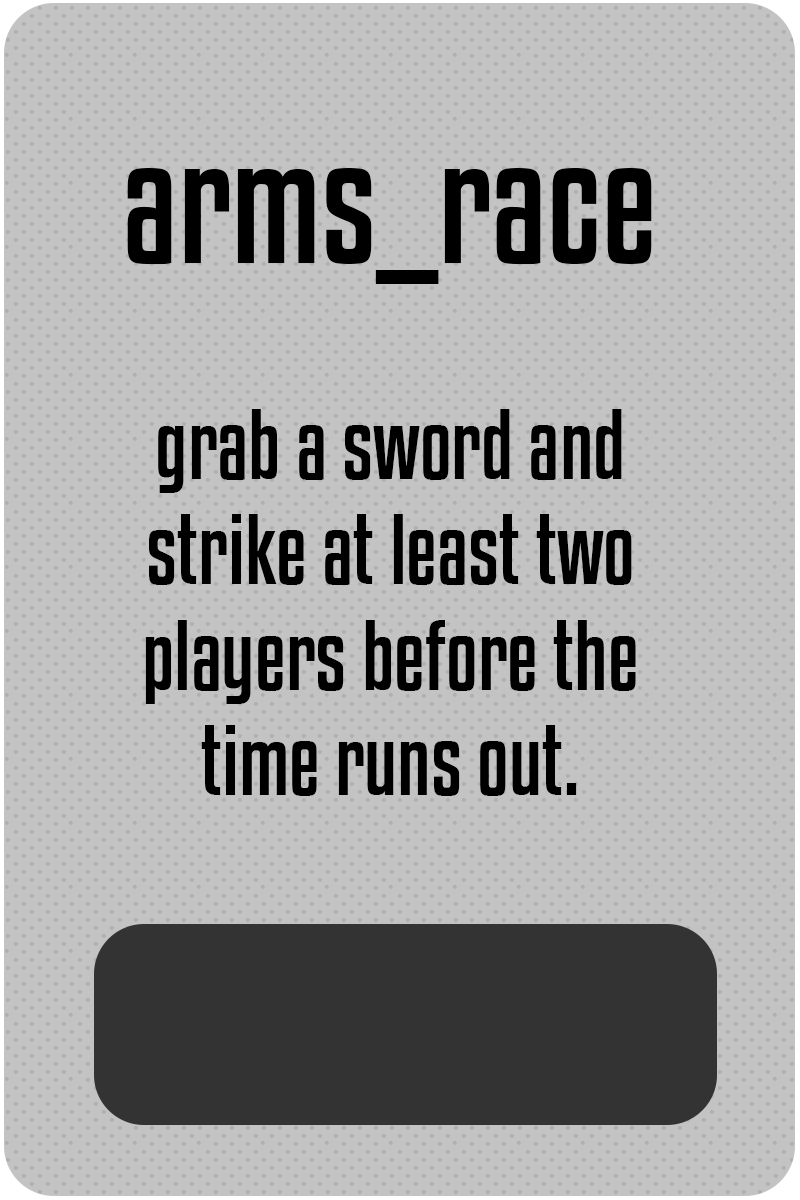
<style>
.page{position:relative;width:800px;height:1200px;background:#c3c3c3}
.page>*{position:absolute;margin:0}
.t1{font:156.9px "KenyanCoffeeRg-Regular";color:#000000}
.t2{font:87.9px "KenyanCoffeeRg-Regular";color:#000000}
</style>
<div class="page">
<p class="t1" style="left:127px;top:168px;width:525px;height:116px">arms_race</p>
<p class="t2" style="left:145px;top:409px;width:491px;height:387px;text-align:center">grab a sword and strike at least two players before the time runs out.</p>
</div>
